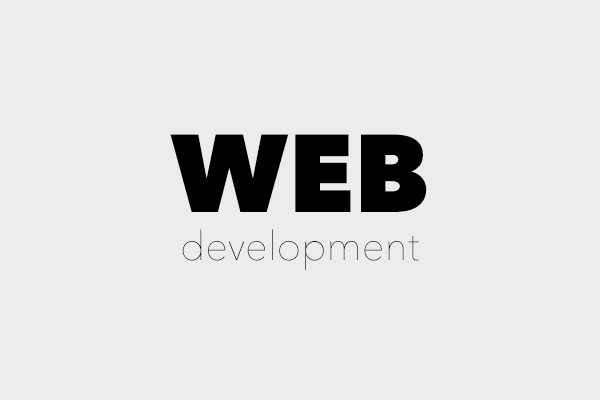
<style>
.page{position:relative;width:600px;height:400px;background:#ececec}
.page>*{position:absolute;margin:0}
.t1{font:40.3px "AvenirNext-UltraLight";color:#000000}
.t2{font:109px "AvenirNext-Heavy";color:#000000}
</style>
<div class="page">
<p class="t1" style="left:170px;top:134px;width:257px;height:136px;text-align:center"><span class="t2">WEB</span><br>development</p>
</div>
